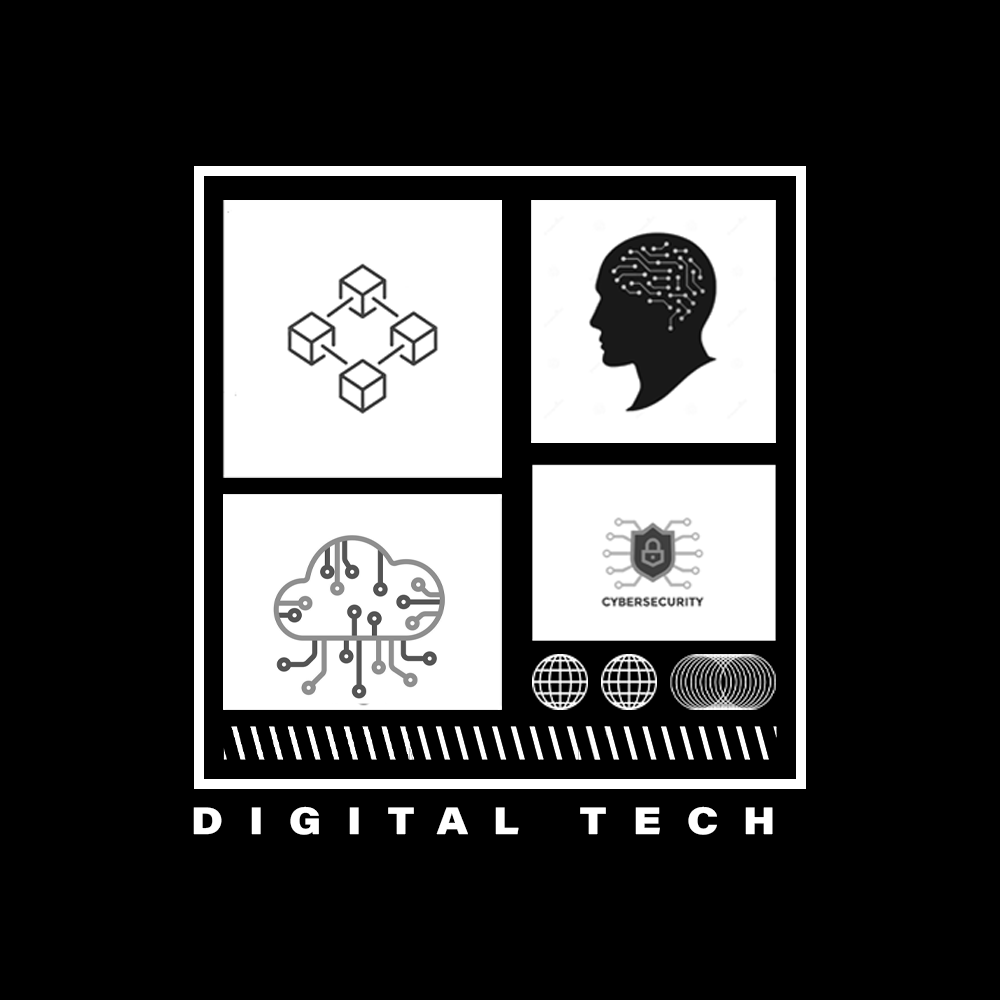
<style>
.page{position:relative;width:1000px;height:1000px;background:#000000}
.page>*{position:absolute;margin:0}
.t1{font:37.5px "AcuminConcept-WideBlack";letter-spacing:0.7em;color:#ffffff}
</style>
<div class="page">
<p class="t1" style="left:193px;top:806px;width:580px;height:29px">DIGITAL TECH</p>
</div>
